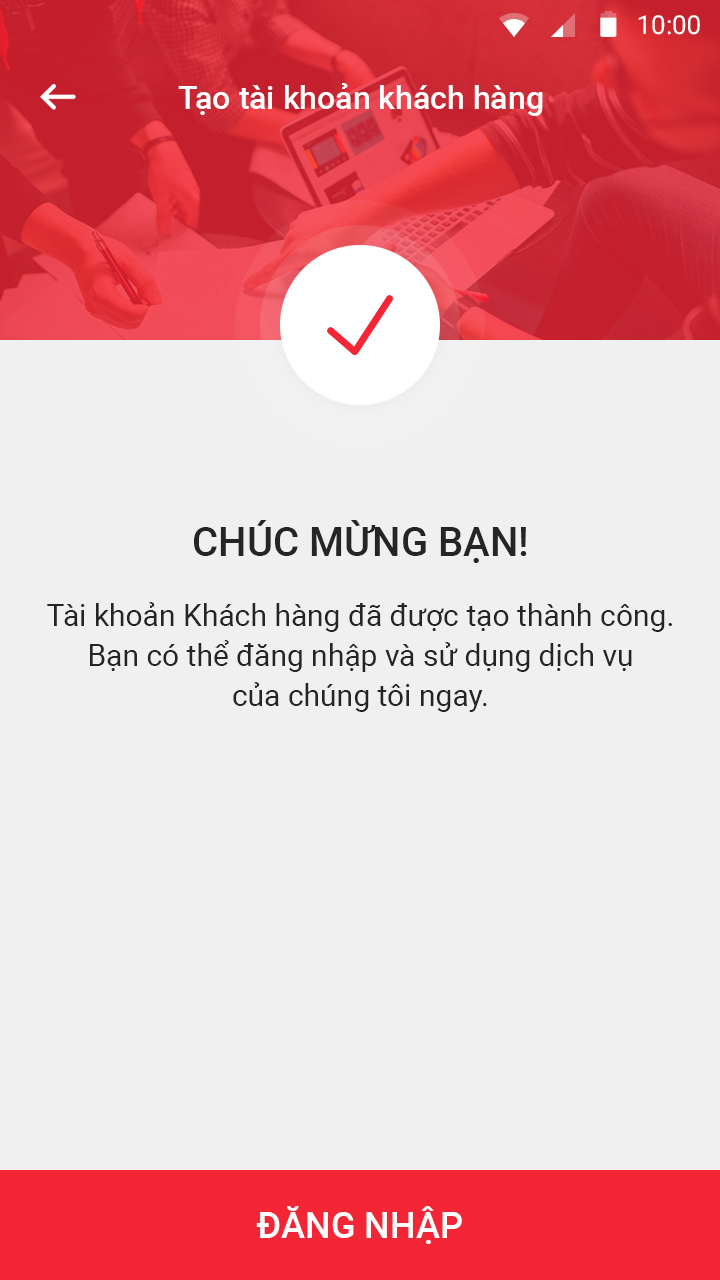
<style>
.page{position:relative;width:720px;height:1280px;background:#f0f0f0}
.page>*{position:absolute;margin:0}
.t1{font:26px "Roboto-Regular";color:#ffffff}
.t2{font:32px "Roboto-Medium";color:#ffffff}
.t3{font:30px/40px "Roboto-Regular";color:#252525}
.t4{font:40px "Roboto-Medium";color:#252525;text-transform:uppercase}
.t5{font:30px/70px "Roboto-Regular";color:#252525}
.t6{font:36px "Roboto-Medium";color:#ffffff;text-transform:uppercase}
</style>
<div class="page">
<p class="t1" style="left:638px;top:15px;width:62px;height:20px">10:00</p>
<p class="t2" style="left:178px;top:83px;width:365px;height:33px">Tạo tài khoản khách hàng</p>
<p class="t3" style="left:47px;top:520px;width:625px;height:192px;text-align:center"><span class="t4">Chúc mừng bạn!<br></span><span class="t5">Tài khoản Khách hàng đã được tạo thành công.<br></span>Bạn có thể đăng nhập và sử dụng dịch vụ<br>của chúng tôi ngay.</p>
<p class="t6" style="left:256px;top:1206px;width:206px;height:38px">đăng nhập</p>
</div>
